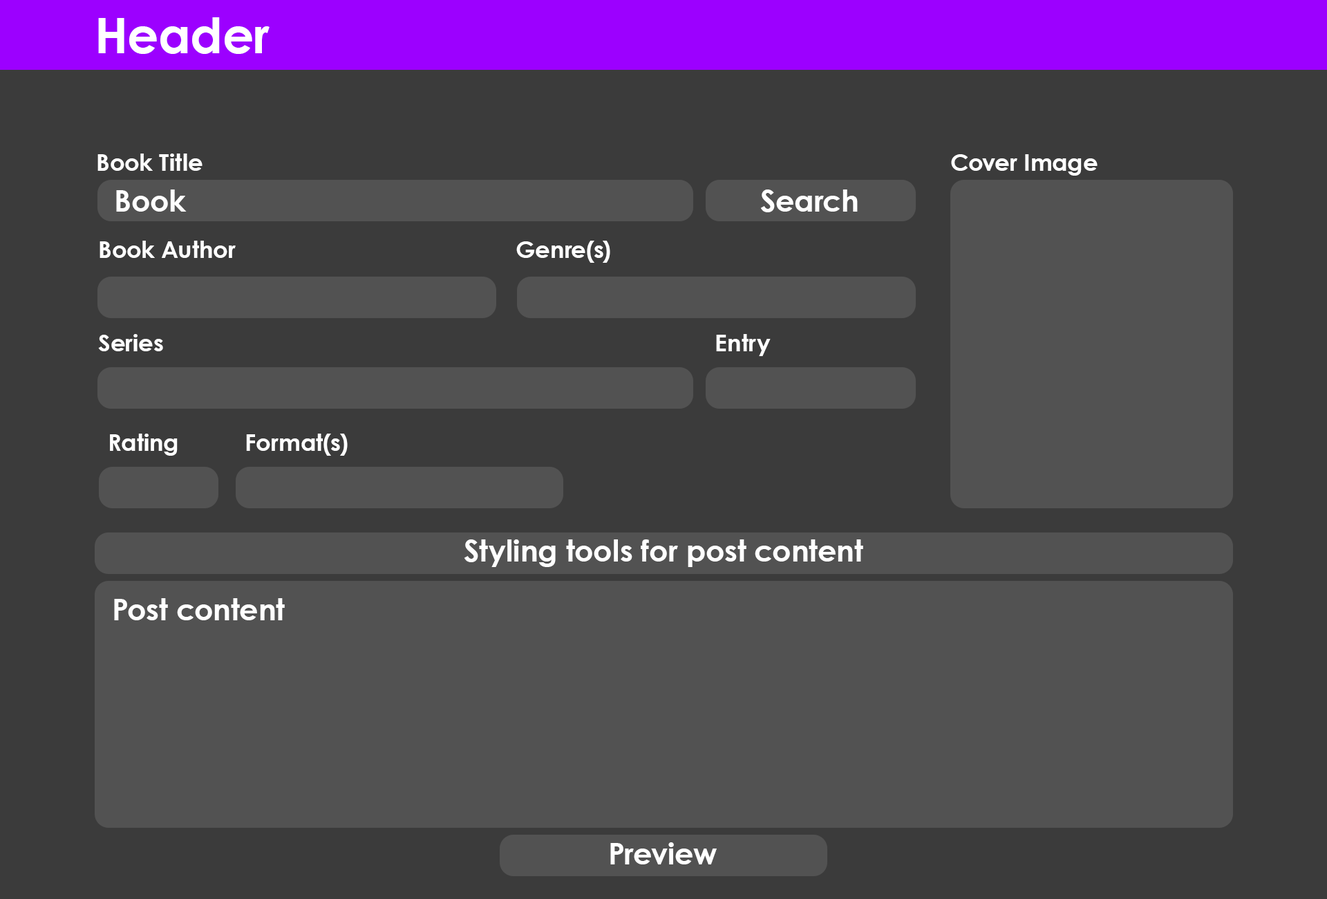
<style>
.page{position:relative;width:1327px;height:899px;background:#525252}
.page>*{position:absolute;margin:0}
.t1{font:48.9px "CenturyGothic-Bold";color:#ffffff}
.t2{font:23.3px "CenturyGothic-Bold";color:#ffffff}
.t3{font:29.7px "CenturyGothic-Bold";color:#ffffff}
</style>
<div class="page">
<p class="t1" style="left:98px;top:17px;width:172px;height:37px">Header</p>
<p class="t2" style="left:97px;top:153px;width:106px;height:18px">Book Title</p>
<p class="t2" style="left:951px;top:154px;width:147px;height:22px">Cover Image</p>
<p class="t3" style="left:116px;top:189px;width:71px;height:23px">Book</p>
<p class="t3" style="left:760px;top:189px;width:98px;height:23px">Search</p>
<p class="t2" style="left:100px;top:241px;width:136px;height:17px">Book Author</p>
<p class="t2" style="left:516px;top:241px;width:94px;height:22px">Genre(s)</p>
<p class="t2" style="left:98px;top:334px;width:65px;height:17px">Series</p>
<p class="t2" style="left:716px;top:334px;width:55px;height:22px">Entry</p>
<p class="t2" style="left:110px;top:433px;width:68px;height:22px">Rating</p>
<p class="t2" style="left:246px;top:433px;width:102px;height:22px">Format(s)</p>
<p class="t3" style="left:464px;top:539px;width:399px;height:28px">Styling tools for post content</p>
<p class="t3" style="left:114px;top:598px;width:171px;height:22px">Post content</p>
<p class="t3" style="left:610px;top:842px;width:107px;height:22px">Preview</p>
</div>
